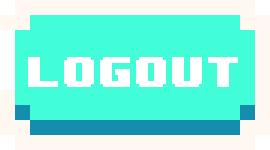
<style>
.page{position:relative;width:270px;height:150px;background:#42fed8}
.page>*{position:absolute;margin:0}
.t1{font:36px "8BITWONDERNominal";color:#ffffff}
</style>
<div class="page">
<p class="t1" style="left:28px;top:57px;width:210px;height:30px">Logout</p>
</div>
